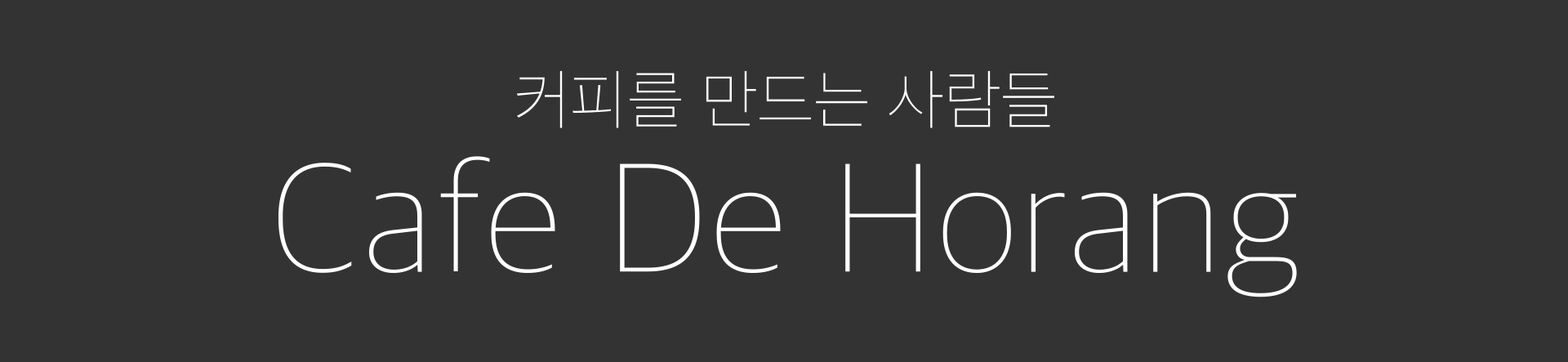
<style>
.page{position:relative;width:1568px;height:362px;background:#333333}
.page>*{position:absolute;margin:0}
.t1{font:65.3px "AppleSDGothicNeo-Thin";color:#ffffff}
.t2{font:163.3px "AppleSDGothicNeo-Thin";color:#ffffff}
</style>
<div class="page">
<p class="t1" style="left:517px;top:70px;width:537px;height:58px">커피를 만드는 사람들</p>
<p class="t2" style="left:278px;top:156px;width:1019px;height:141px">Cafe De Horang</p>
</div>
